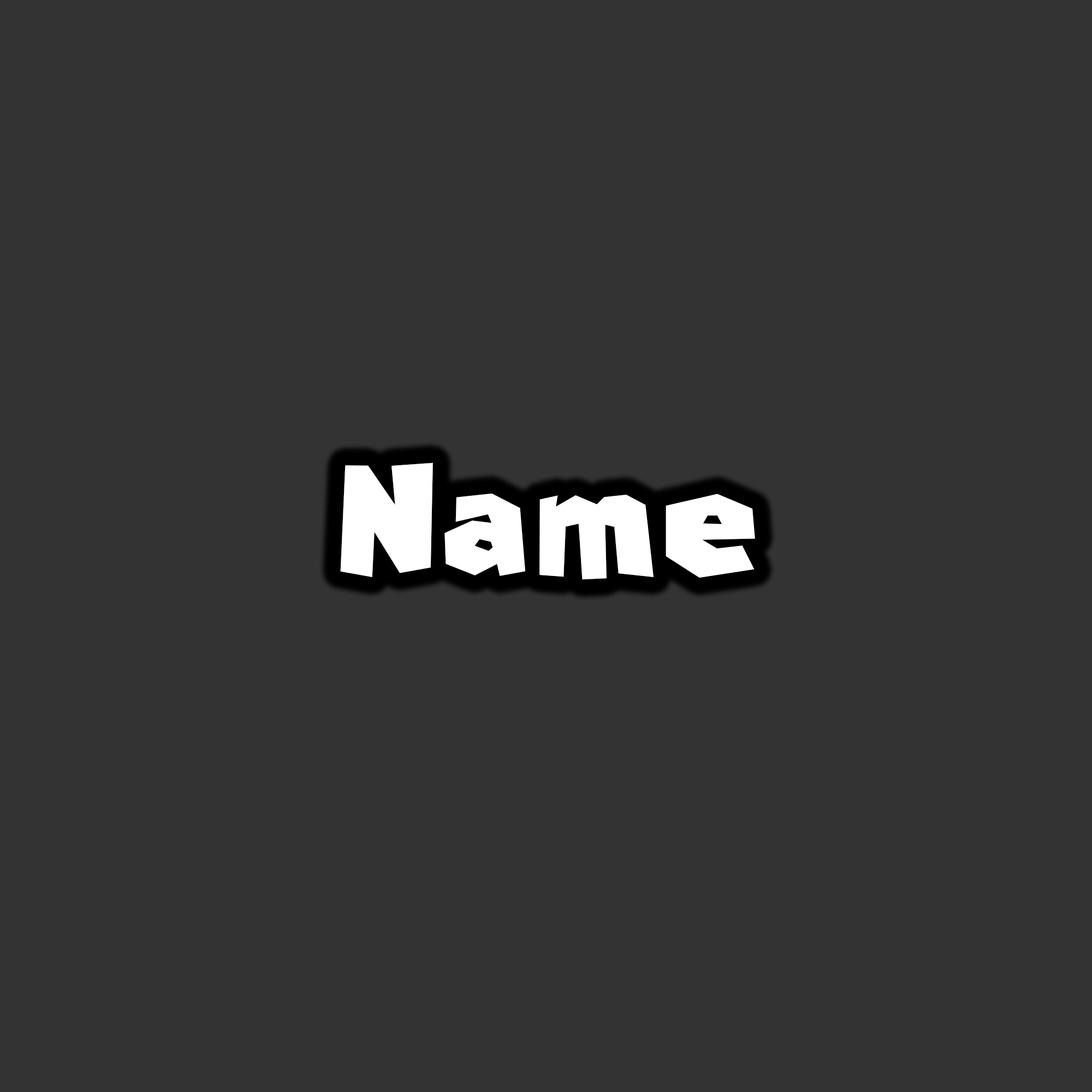
<style>
.page{position:relative;width:1092px;height:1092px;background:#333333}
.page>*{position:absolute;margin:0}
.t1{font:163.8px "PolygonParty";color:#ffffff}
</style>
<div class="page">
<p class="t1" style="left:340px;top:462px;width:415px;height:118px">Name</p>
</div>
